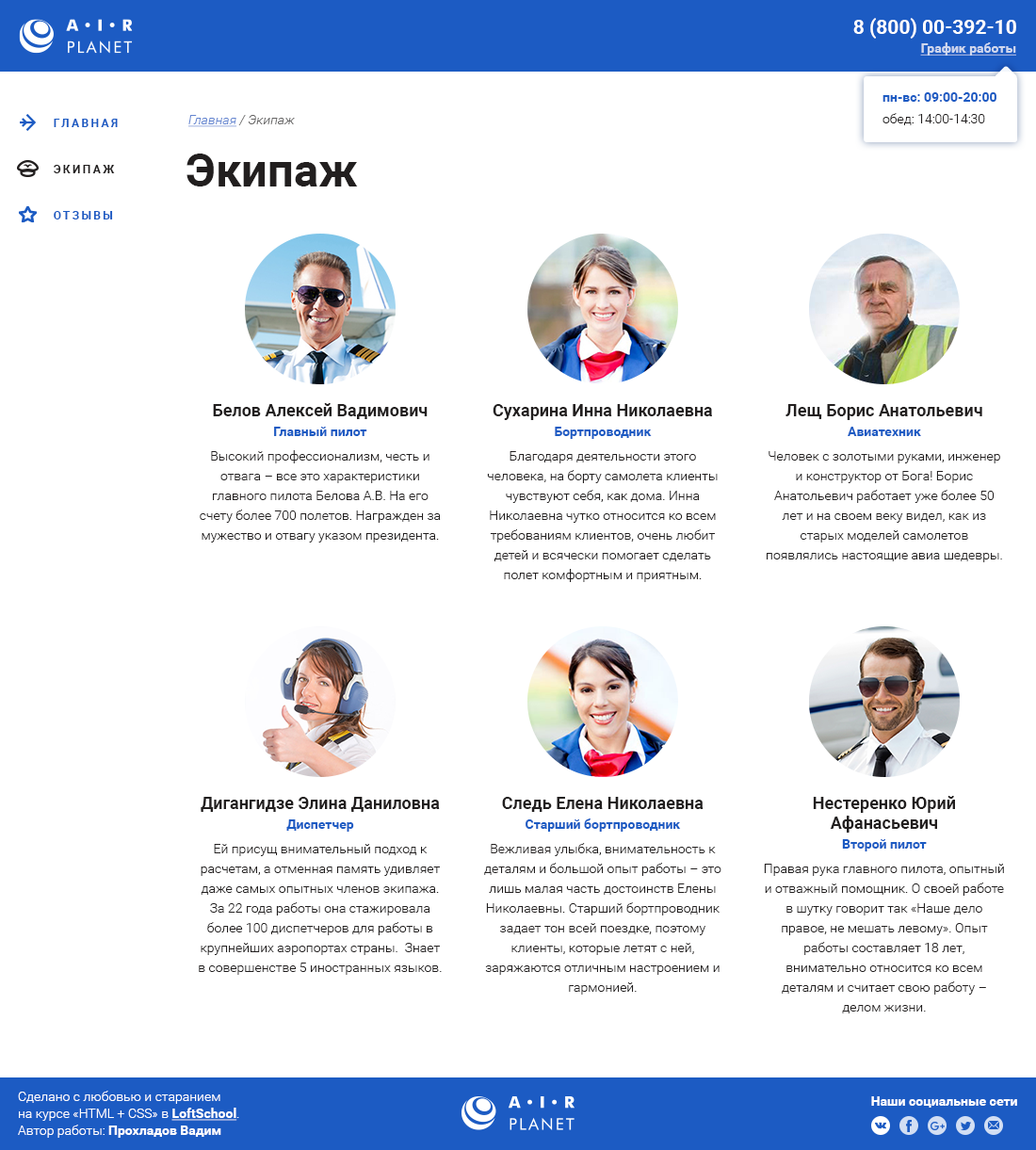
<style>
.page{position:relative;width:1036px;height:1150px;background:#ffffff}
.page>*{position:absolute;margin:0}
.t1{font:19.8px "Roboto-Bold";color:#ffffff;text-transform:uppercase}
.t2{font:13.2px "Roboto-Bold";color:#ced7ee;text-decoration:underline}
.t3{font:13.2px/17px "Roboto-Bold";color:#1c5bc3}
.t4{font:13.2px/17px "Roboto-Light";color:#221f1f}
.t5{font:11.3px "Roboto-Bold";letter-spacing:0.2em;color:#1c5bc3;text-transform:uppercase}
.t6{font:13.2px "Roboto-LightItalic"}
.t7{font:13.2px "Roboto-LightItalic";text-decoration:underline}
.t8{font:46.2px "Roboto-Bold";color:#221f1f}
.t9{font:11.3px "Roboto-Bold";letter-spacing:0.2em;color:#221f1f;text-transform:uppercase}
.t10{font:13.2px/19.8px "Roboto-Light";color:#221f1f}
.t11{font:17px/19.8px "Roboto-Bold";color:#221f1f}
.t12{font:13.2px/19.8px "Roboto-Bold";color:#1c5bc3}
.t13{font:13.2px/17px "Roboto-Light";color:#ffffff}
.t14{font:13.2px/17px "Roboto-Bold";color:#ffffff;text-decoration:underline}
.t15{font:13.2px/17px "Roboto-Bold";color:#ffffff}
.t16{font:13.2px "Roboto-Bold";color:#ffffff}
</style>
<div class="page">
<p class="t1" style="left:854px;top:18px;width:163px;height:21px">8 (800) 00-392-10</p>
<p class="t2" style="left:921px;top:42px;width:96px;height:14px">График работы</p>
<p class="t3" style="left:883px;top:92px;width:114px;height:33px">пн-вс: 09:00-20:00<br><span class="t4">обед: 14:00-14:30</span></p>
<p class="t5" style="left:54px;top:119px;width:64px;height:8px">Главная</p>
<p class="t6" style="left:188px;top:115px;width:107px;height:12px"><span class="t7">Главная</span> / Экипаж</p>
<p class="t8" style="left:187px;top:154px;width:171px;height:33px">Экипаж</p>
<p class="t9" style="left:54px;top:165px;width:61px;height:8px">Экипаж</p>
<p class="t5" style="left:54px;top:211px;width:59px;height:9px">Отзывы</p>
<p class="t10" style="left:200px;top:403px;width:241px;height:140px;text-align:center"><span class="t11">Белов Алексей Вадимович<br></span><span class="t12">Главный пилот<br></span>Высокий профессионализм, честь и отвага – все это характеристики главного пилота Белова А.В. На его счету более 700 полетов. Награжден за мужество и отвагу указом президента.</p>
<p class="t10" style="left:487px;top:404px;width:231px;height:178px;text-align:center"><span class="t11">Сухарина Инна Николаевна<br></span><span class="t12">Бортпроводник<br></span>Благодаря деятельности этого человека, на борту самолета клиенты чувствуют себя, как дома. Инна Николаевна чутко относится ко всем требованиям клиентов, очень любит детей и всячески помогает сделать полет комфортным и приятным.</p>
<p class="t10" style="left:767px;top:404px;width:236px;height:159px;text-align:center"><span class="t11">Лещ Борис Анатольевич<br></span><span class="t12">Авиатехник<br></span>Человек с золотыми руками, инженер <br>и конструктор от Бога! Борис Анатольевич работает уже более 50 лет и на своем веку видел, как из старых моделей самолетов появлялись настоящие авиа шедевры.</p>
<p class="t10" style="left:199px;top:797px;width:243px;height:178px;text-align:center"><span class="t11">Дигангидзе Элина Даниловна<br></span><span class="t12">Диспетчер<br></span>Ей присущ внимательный подход к расчетам, а отменная память удивляет даже самых опытных членов экипажа. За 22 года работы она стажировала более 100 диспетчеров для работы в крупнейших аэропортах страны.  Знает в совершенстве 5 иностранных языков.</p>
<p class="t10" style="left:484px;top:797px;width:238px;height:198px;text-align:center"><span class="t11">Следь Елена Николаевна<br></span><span class="t12">Старший бортпроводник<br></span>Вежливая улыбка, внимательность к деталям и большой опыт работы – это лишь малая часть достоинств Елены Николаевны. Старший бортпроводник задает тон всей поездке, поэтому клиенты, которые летят с ней, заряжаются отличным настроением и гармонией.</p>
<p class="t10" style="left:764px;top:796px;width:240px;height:218px;text-align:center"><span class="t11">Нестеренко Юрий Афанасьевич<br></span><span class="t12">Второй пилот<br></span>Правая рука главного пилота, опытный и отважный помощник. О своей работе в шутку говорит так «Наше дело правое, не мешать левому». Опыт работы составляет 18 лет, внимательно относится ко всем деталям и считает свою работу – делом жизни.</p>
<p class="t13" style="left:18px;top:1091px;width:221px;height:47px">Сделано с любовью и старанием<br>на курсе «HTML + CSS» в <span class="t14">LoftSchool</span>.<br>Автор работы: <span class="t15">Прохладов Вадим</span></p>
<p class="t16" style="left:872px;top:1097px;width:146px;height:11px">Наши социальные сети</p>
</div>
